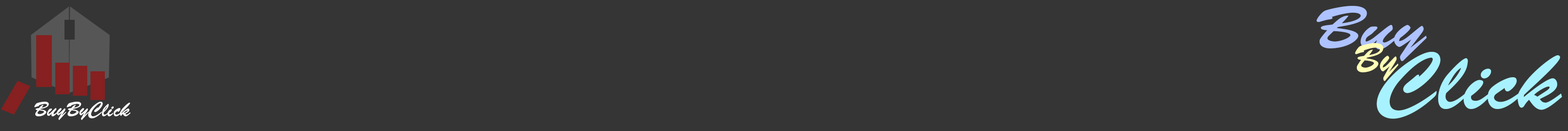
<style>
.page{position:relative;width:1568px;height:131px;background:#353535}
.page>*{position:absolute;margin:0}
.t1{font:61.1px "BrushScriptStd";color:#aec3ff;scale:1.13 1}
.t2{font:41.7px "BrushScriptStd";color:#fffeb6;scale:0.93 1}
.t3{font:80.8px "BrushScriptStd";color:#a8f2ff;scale:1.06 1}
.t4{font:19.8px "BrushScriptStd";color:#ffffff}
</style>
<div class="page">
<p class="t1" style="left:1316px;top:6px;width:111px;height:55px">Buy</p>
<p class="t2" style="left:1355px;top:43px;width:43px;height:38px">By</p>
<p class="t3" style="left:1376px;top:52px;width:186px;height:67px">Click</p>
<p class="t4" style="left:34px;top:102px;width:97px;height:19px">BuyByClick</p>
</div>
